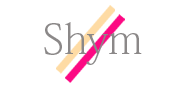
<style>
.page{position:relative;width:180px;height:90px;background:#ffffff}
.page>*{position:absolute;margin:0}
.t1{font:41px "KozMinPro-ExtraLight";color:#8b8888}
</style>
<div class="page">
<p class="t1" style="left:44px;top:22px;width:98px;height:43px">Shym</p>
</div>
